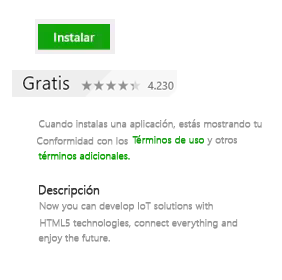
<style>
.page{position:relative;width:282px;height:280px;background:#ffffff}
.page>*{position:absolute;margin:0}
.t1{font:9.9px "SegoeUI-Light";color:#979797;font-weight:bold}
.t2{font:10px "SegoeUI-Light";color:#1b9f19;font-weight:bold}
.t3{font:9.9px "SegoeUI-Light";color:#12a30a;font-weight:bold}
.t4{font:12px "SegoeUI-Light";color:#383838;font-weight:bold}
</style>
<div class="page">
<p class="t1" style="left:39px;top:119px;width:223px;height:11px">Cuando instalas una aplicación, estás mostrando tu</p>
<p class="t1" style="left:37px;top:137px;width:91px;height:8px">Conformidad con los</p>
<p class="t2" style="left:132px;top:135px;width:72px;height:9px">Términos de uso</p>
<p class="t1" style="left:207px;top:137px;width:30px;height:9px">y otros</p>
<p class="t3" style="left:38px;top:151px;width:92px;height:9px">términos adicionales.</p>
<p class="t4" style="left:39px;top:185px;width:61px;height:13px">Descripción</p>
<p class="t1" style="left:39px;top:202px;width:174px;height:10px">Now you can develop IoT solutions with</p>
<p class="t1" style="left:40px;top:219px;width:198px;height:10px">HTML5 technologies, connect everything and</p>
<p class="t1" style="left:38px;top:234px;width:72px;height:10px">enjoy the future.</p>
</div>
